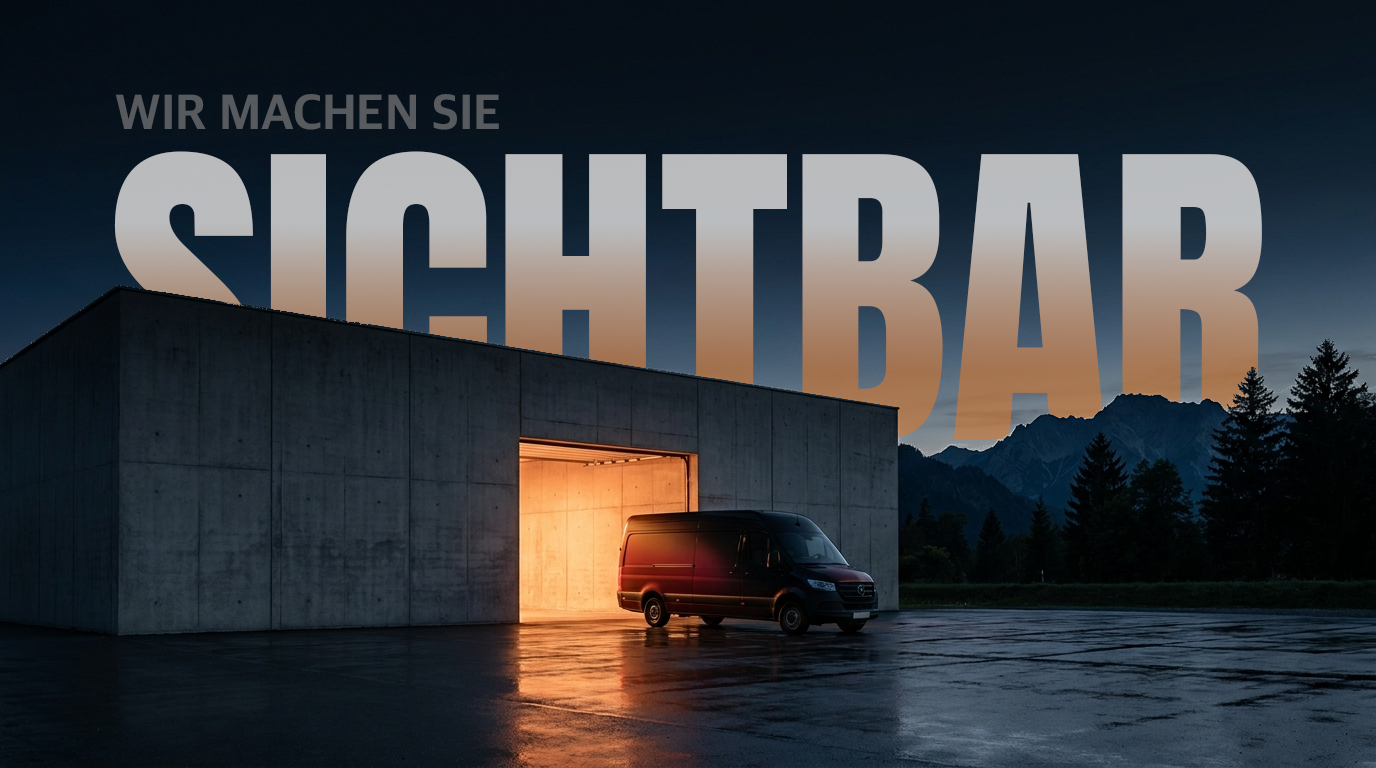
<style>
.page{position:relative;width:1376px;height:768px}
.page>*{position:absolute;margin:0}
.t1{font:50px "AppleSDGothicNeo-ExtraBold";color:#575a5e;text-transform:uppercase}
.t2{font:331.5px "Anton-Regular"}
</style>
<div class="page">
<p class="t1" style="left:116px;top:94px;width:383px;height:36px">Wir machen Sie</p>
<p class="t2" style="left:114px;top:151px;width:1148px;height:291px">SICHTBAR</p>
</div>
